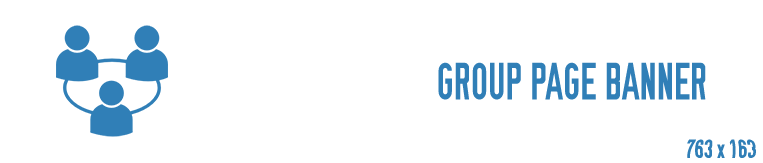
<style>
.page{position:relative;width:763px;height:163px;background:#ffffff}
.page>*{position:absolute;margin:0}
.t1{font:52.4px "OSP-DIN";color:#307fb7;scale:0.85 1}
.t2{font:25.2px "OSP-DIN";color:#307fb7;scale:0.85 1}
</style>
<div class="page">
<p class="t1" style="left:438px;top:62px;width:268px;height:38px">GROUP PAGE BANNER</p>
<p class="t2" style="left:687px;top:139px;width:69px;height:19px">763 x 163</p>
</div>
